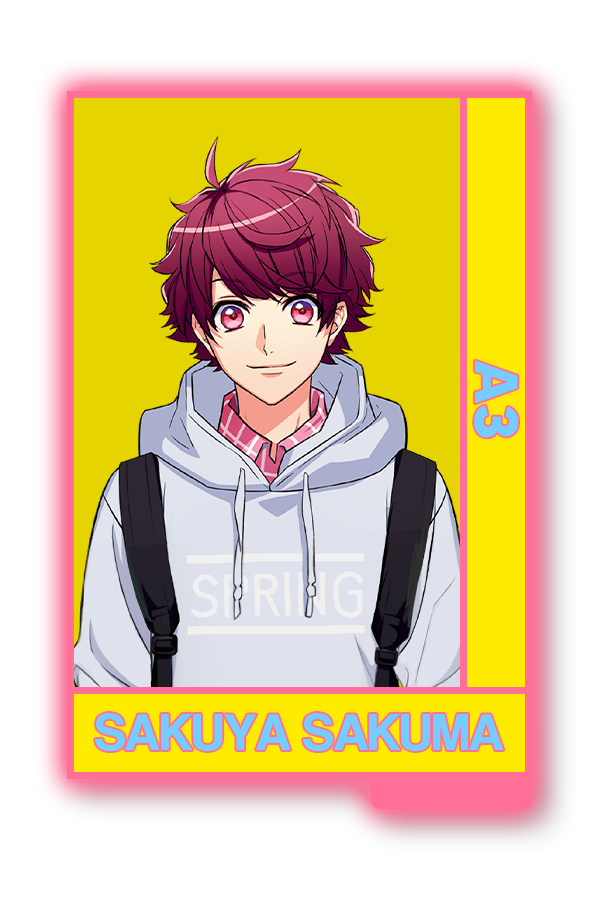
<style>
.page{position:relative;width:600px;height:900px;background:#ffffff}
.page>*{position:absolute;margin:0}
.t1{font:60.5px "MADETOMMY-Bold";color:#74ccff}
.t2{font:53.6px "CoolveticaRg-Regular";color:#74ccff}
</style>
<div class="page">
<p class="t1" style="left:474px;top:360px;width:44px;height:78px;rotate:90deg">A3</p>
<p class="t2" style="left:95px;top:713px;width:409px;height:38px">SAKUYA SAKUMA</p>
</div>
